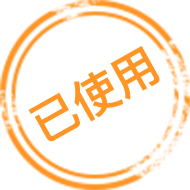
<style>
.page{position:relative;width:190px;height:190px;background:#ffffff}
.page>*{position:absolute;margin:0}
.t1{font:46.1px "PingFang-SC-Heavy";color:#fe9525}
</style>
<div class="page">
<p class="t1" style="left:28px;top:46px;width:132px;height:96px;rotate:-29deg">已使用</p>
</div>
